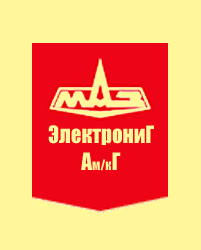
<style>
.page{position:relative;width:201px;height:250px;background:#fff799}
.page>*{position:absolute;margin:0}
.t1{font:22px "Impact";color:#fff799;scale:0.95 1}
.t2{font:13px "Impact";color:#fff799;scale:0.95 1}
</style>
<div class="page">
<p class="t1" style="left:48px;top:125px;width:106px;height:20px">ЭлектрониГ</p>
<p class="t2" style="left:81px;top:152px;width:40px;height:19px"><span class="t1">А</span>м/к<span class="t1">Г</span></p>
</div>
